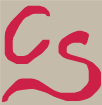
<style>
.page{position:relative;width:102px;height:105px;background:#c4bbaa}
.page>*{position:absolute;margin:0}
.t1{font:200px "Anarchistic";letter-spacing:0.025em;color:#cc2048}
</style>
<div class="page">
<p class="t1" style="left:4px;top:5px;width:46px;height:59px">C</p>
<p class="t1" style="left:2px;top:30px;width:99px;height:72px">s</p>
</div>
